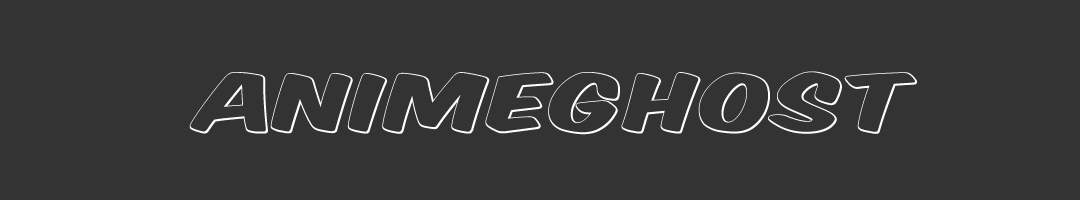
<style>
.page{position:relative;width:1080px;height:200px;background:#333333}
.page>*{position:absolute;margin:0}
.t1{font:75px "KomikaTitle-Ghost";color:#ffffff;text-transform:uppercase}
</style>
<div class="page">
<p class="t1" style="left:189px;top:71px;width:728px;height:64px">animeghost</p>
</div>
